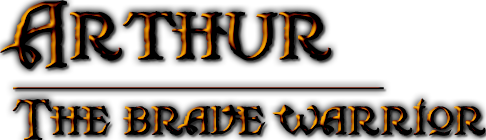
<style>
.page{position:relative;width:486px;height:140px;background:#ffffff}
.page>*{position:absolute;margin:0}
.t1{font:60px "Scurlock";color:#000000}
.t2{font:100px "Scurlock";color:#000000;text-decoration:underline}
</style>
<div class="page">
<p class="t1" style="left:0px;top:0px;width:486px;height:140px"><span class="t2">Arthur  <br></span>The brave warrior</p>
</div>
